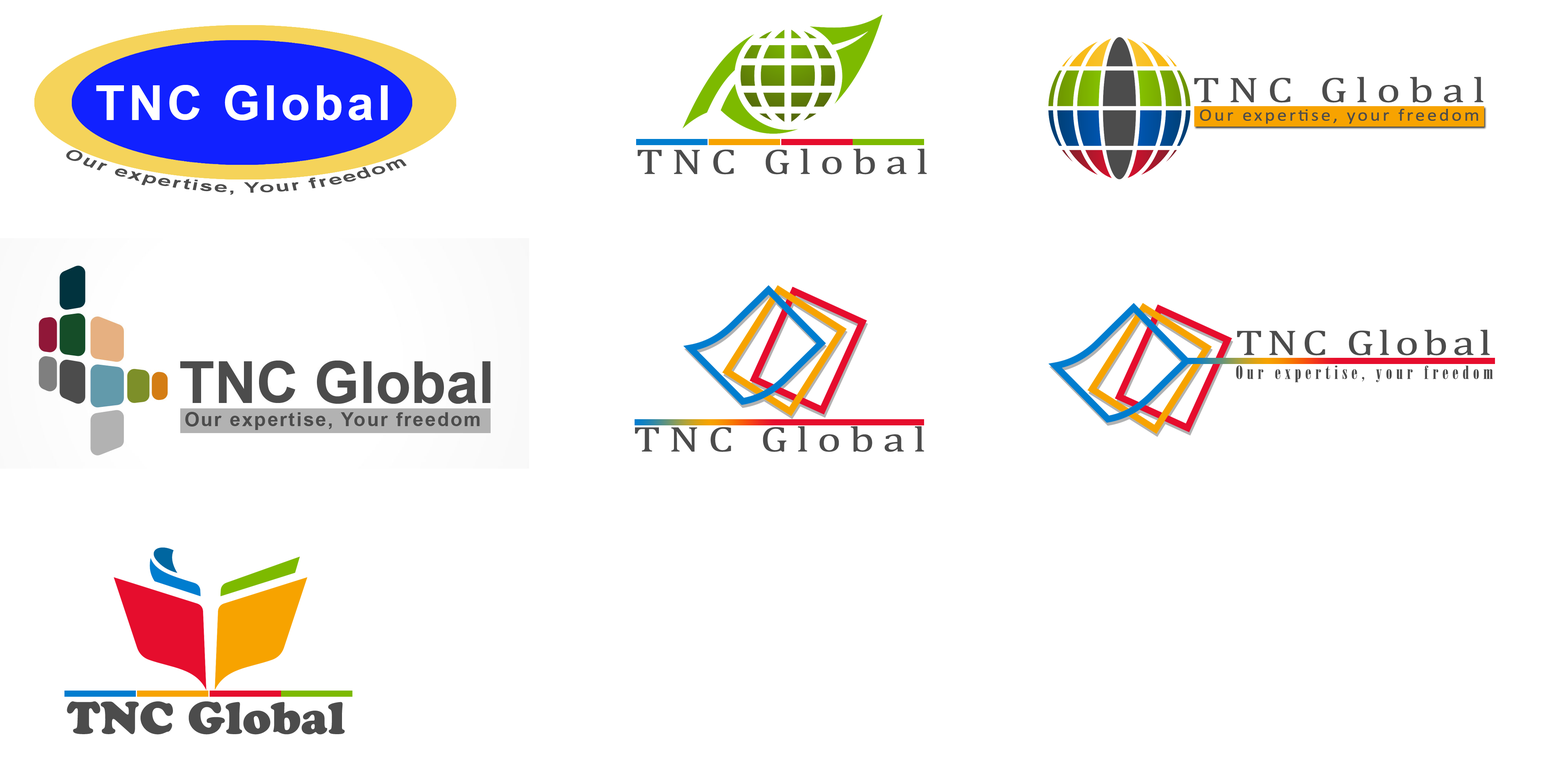
<style>
.page{position:relative;width:1544px;height:772px;background:#ffffff}
.page>*{position:absolute;margin:0}
.t1{font:36px "Cambria";letter-spacing:0.19em;color:#4c4c4c;scale:1.25 1}
.t2{font:48.3px "Arial-BoldMT";letter-spacing:0.075em;color:#ffffff}
.t3{font:17.4px "Calibri";letter-spacing:0.12em;color:#4c4c4c;scale:1.11 1}
.t4{font:14.4px "Arial-BoldMT";letter-spacing:0.075em;color:#4c4c4c;scale:1.48 1}
.t5{font:36px "Cambria";letter-spacing:0.1em;color:#4c4c4c;scale:1.25 1}
.t6{font:18px "BodoniMTPosterCompressed";letter-spacing:0.185em;color:#4c4c4c;scale:1.25 1}
.t7{font:45px "CooperBlackStd";color:#4c4c4c}
</style>
<div class="page">
<p class="t1" style="left:1195px;top:77px;width:289px;height:26px">TNC Global</p>
<p class="t2" style="left:96px;top:85px;width:292px;height:35px">TNC Global</p>
<p class="t3" style="left:1200px;top:108px;width:279px;height:16px">Our expertise, your freedom</p>
<p class="t4" style="left:66px;top:150px;width:341px;height:45px;rotate:1deg">Our expertise, Your freedom</p>
<p class="t1" style="left:638px;top:149px;width:289px;height:26px">TNC Global</p>
<p class="t5" style="left:1237px;top:330px;width:253px;height:26px">TNC Global</p>
<p class="t6" style="left:1236px;top:365px;width:257px;height:18px">Our expertise, your freedom</p>
<p class="t1" style="left:635px;top:426px;width:289px;height:26px">TNC Global</p>
<p class="t7" style="left:67px;top:701px;width:278px;height:34px">TNC Global</p>
</div>
